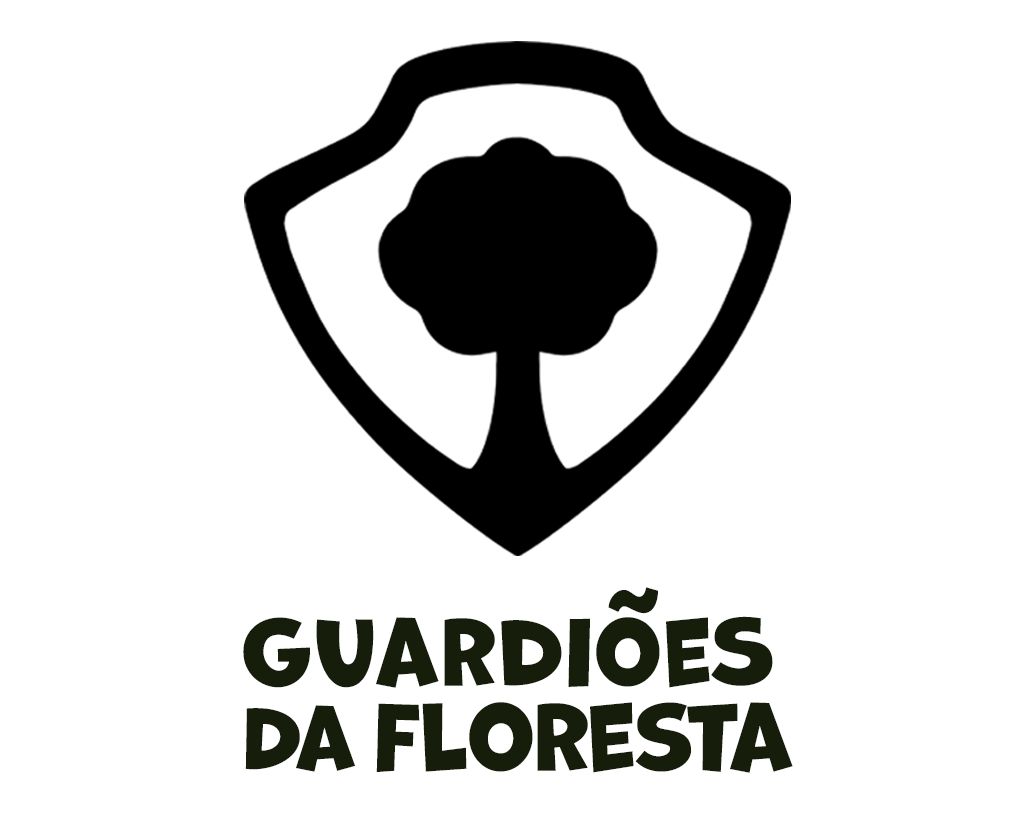
<style>
.page{position:relative;width:1024px;height:816px;background:#ffffff}
.page>*{position:absolute;margin:0}
.t1{font:93.2px "Marvin";letter-spacing:0.01em;color:#161d0b}
.t2{font:87px "Marvin";letter-spacing:0.02em;color:#161d0b}
.t3{font:87px "Marvin";letter-spacing:-0.01em;color:#161d0b}
.t4{font:82px "Marvin";letter-spacing:-0.03em;color:#161d0b}
</style>
<div class="page">
<p class="t1" style="left:608px;top:587px;width:50px;height:27px">~</p>
<p class="t2" style="left:243px;top:616px;width:530px;height:72px">GuardioeS</p>
<p class="t3" style="left:376px;top:702px;width:417px;height:71px">Floresta</p>
<p class="t4" style="left:245px;top:705px;width:111px;height:67px">Da</p>
</div>
